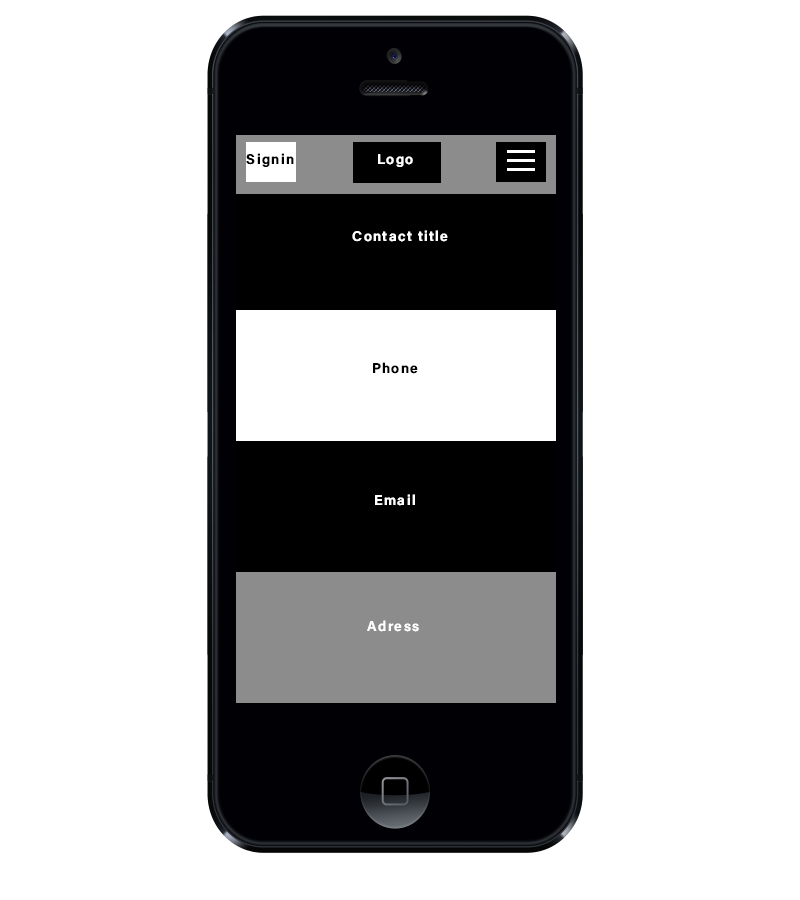
<style>
.page{position:relative;width:800px;height:900px;background:#ffffff}
.page>*{position:absolute;margin:0}
.t1{font:14px "AcuminConcept-Semibold";letter-spacing:0.1em;color:#000000}
.t2{font:14px "AcuminConcept-Semibold";letter-spacing:0.1em;color:#ffffff}
</style>
<div class="page">
<p class="t1" style="left:246px;top:153px;width:48px;height:14px">Signin</p>
<p class="t2" style="left:378px;top:154px;width:35px;height:13px">Logo</p>
<p class="t2" style="left:352px;top:230px;width:96px;height:12px">Contact title</p>
<p class="t1" style="left:373px;top:362px;width:45px;height:12px">Phone</p>
<p class="t2" style="left:375px;top:494px;width:40px;height:12px">Email</p>
<p class="t2" style="left:367px;top:620px;width:52px;height:12px">Adress</p>
</div>
